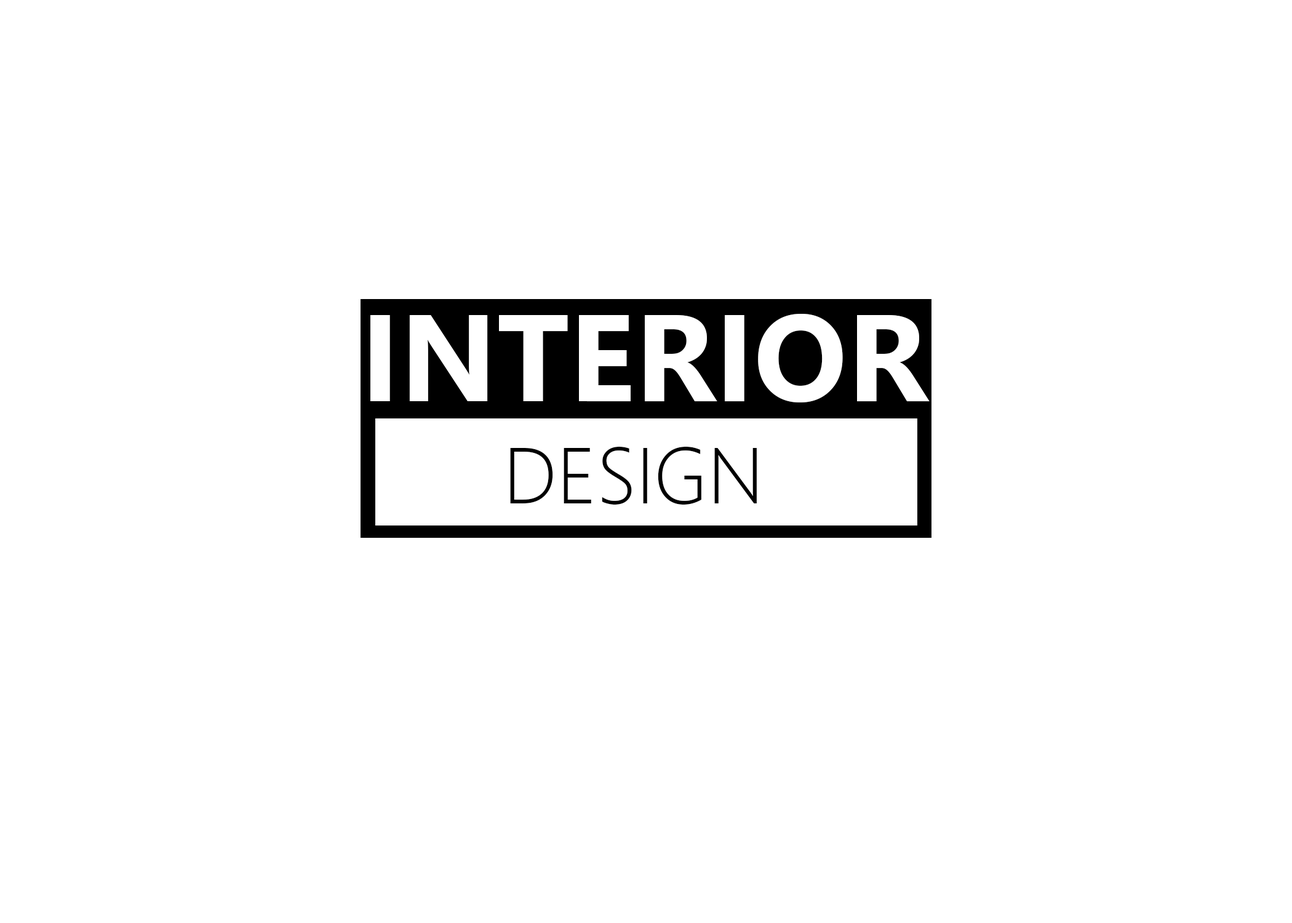
<style>
.page{position:relative;width:1292px;height:923px;background:#ffffff}
.page>*{position:absolute;margin:0}
.t1{font:123.1px "SegoeUI-Bold";color:#ffffff}
.t2{font:79.5px "SegoeUI-Light";color:#000000}
</style>
<div class="page">
<p class="t1" style="left:370px;top:314px;width:560px;height:88px">INTERIOR</p>
<p class="t2" style="left:510px;top:447px;width:247px;height:58px">DESIGN</p>
</div>
